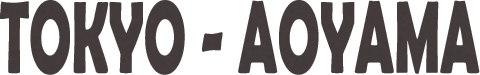
<style>
.page{position:relative;width:480px;height:75px;background:#ffffff}
.page>*{position:absolute;margin:0}
.t1{font:103.2px "BerlinSansFBDemi-Bold";color:#433c3b;scale:0.55 1}
</style>
<div class="page">
<p class="t1" style="left:0px;top:0px;width:480px;height:75px">TOKYO - AOYAMA</p>
</div>
